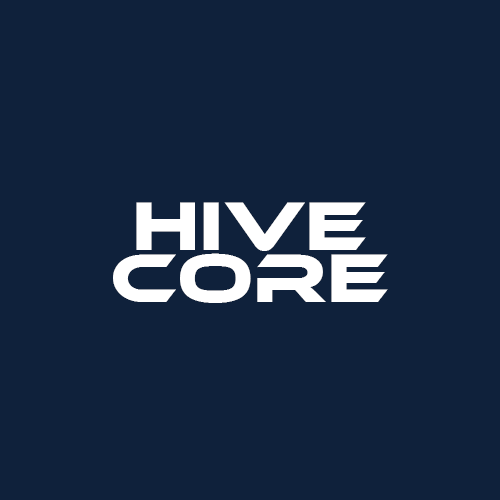
<style>
.page{position:relative;width:500px;height:500px;background:#0f213b}
.page>*{position:absolute;margin:0}
.t1{font:71.3px/52px "EthnocentricRg-Regular";color:#ffffff}
</style>
<div class="page">
<p class="t1" style="left:113px;top:202px;width:275px;height:101px;text-align:center">Hive<br>core</p>
</div>
